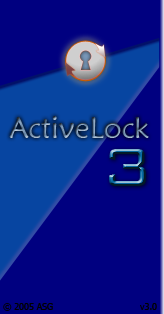
<style>
.page{position:relative;width:164px;height:314px;background:#000080}
.page>*{position:absolute;margin:0}
.t1{font:30px "MaiandraGD-Regular"}
.t2{font:72px "BankGothicBT-Light"}
.t3{font:9px "Tahoma";color:#000000}
</style>
<div class="page">
<p class="t1" style="left:9px;top:116px;width:140px;height:22px">ActiveLock</p>
<p class="t2" style="left:109px;top:149px;width:37px;height:37px">3</p>
<p class="t3" style="left:3px;top:303px;width:50px;height:8px">© 2005 ASG</p>
<p class="t3" style="left:140px;top:303px;width:17px;height:7px">v3.0</p>
</div>
